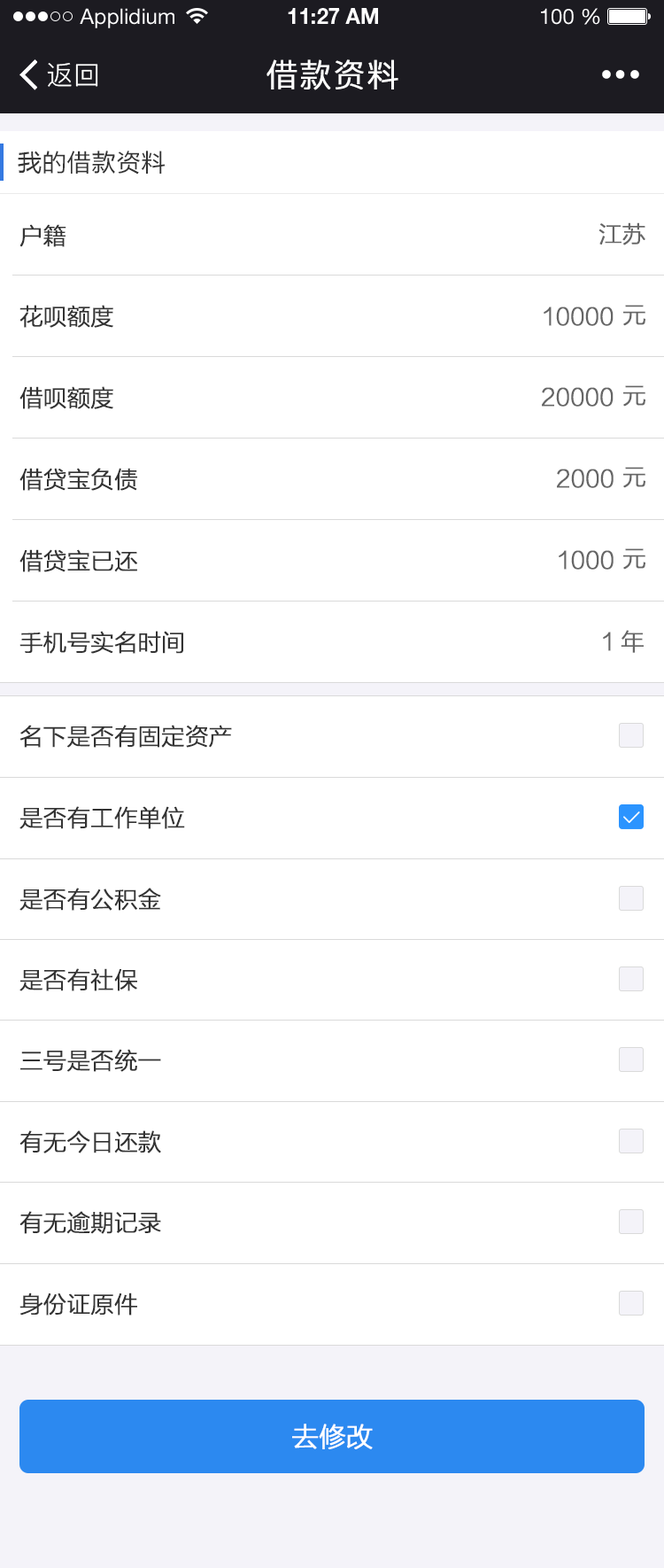
<style>
.page{position:relative;width:664px;height:1568px;background:#ffffff}
.page>*{position:absolute;margin:0}
.t1{font:21.3px "HelveticaNeueLTStd-Roman";color:#ffffff}
.t2{font:21.3px "HelveticaNeueLTStd-Bd";color:#ffffff}
.t3{font:26.6px "PingFang-SC-Regular";letter-spacing:0.025em;color:#ffffff}
.t4{font:31.9px "PingFang-SC-Regular";letter-spacing:0.025em;color:#ffffff;font-weight:bold}
.t5{font:24.8px "FZLTH_YS_GBK";color:#333333}
.t6{font:23px "FZLTXHK--GBK1-0";color:#333333;font-weight:bold}
.t7{font:23px "FZLTXHK--GBK1-0";color:#666666;font-weight:bold}
.t8{font:26.6px "FZLTXHK--GBK1-0";color:#ffffff;font-weight:bold}
</style>
<div class="page">
<p class="t1" style="left:80px;top:8px;width:95px;height:20px">Applidium</p>
<p class="t2" style="left:288px;top:8px;width:90px;height:16px">11:27 AM</p>
<p class="t1" style="left:541px;top:8px;width:60px;height:17px">100 %</p>
<p class="t3" style="left:47px;top:63px;width:51px;height:24px">返回</p>
<p class="t4" style="left:267px;top:59px;width:132px;height:31px">借款资料</p>
<p class="t5" style="left:18px;top:151px;width:148px;height:24px">我的借款资料</p>
<p class="t6" style="left:19px;top:224px;width:47px;height:23px">户籍</p>
<p class="t7" style="left:599px;top:222px;width:47px;height:23px">江苏</p>
<p class="t6" style="left:19px;top:305px;width:94px;height:23px">花呗额度</p>
<p class="t7" style="left:624px;top:305px;width:22px;height:21px">元</p>
<p class="t7" style="left:544px;top:307px;width:70px;height:19px">10000</p>
<p class="t6" style="left:19px;top:386px;width:94px;height:23px">借呗额度</p>
<p class="t7" style="left:542px;top:387px;width:72px;height:20px">20000</p>
<p class="t7" style="left:624px;top:385px;width:22px;height:22px">元</p>
<p class="t6" style="left:19px;top:468px;width:118px;height:23px">借贷宝负债</p>
<p class="t7" style="left:557px;top:469px;width:57px;height:19px">2000</p>
<p class="t7" style="left:624px;top:467px;width:22px;height:21px">元</p>
<p class="t6" style="left:19px;top:549px;width:118px;height:23px">借贷宝已还</p>
<p class="t7" style="left:559px;top:550px;width:55px;height:20px">1000</p>
<p class="t7" style="left:624px;top:548px;width:22px;height:22px">元</p>
<p class="t7" style="left:603px;top:630px;width:41px;height:23px">1年</p>
<p class="t6" style="left:19px;top:631px;width:164px;height:23px">手机号实名时间</p>
<p class="t6" style="left:19px;top:725px;width:213px;height:23px">名下是否有固定资产</p>
<p class="t6" style="left:19px;top:806px;width:166px;height:23px">是否有工作单位</p>
<p class="t6" style="left:19px;top:888px;width:142px;height:23px">是否有公积金</p>
<p class="t6" style="left:19px;top:968px;width:118px;height:23px">是否有社保</p>
<p class="t6" style="left:20px;top:1049px;width:141px;height:23px">三号是否统一</p>
<p class="t6" style="left:19px;top:1130px;width:142px;height:23px">有无今日还款</p>
<p class="t6" style="left:19px;top:1211px;width:142px;height:23px">有无逾期记录</p>
<p class="t6" style="left:19px;top:1292px;width:118px;height:24px">身份证原件</p>
<p class="t8" style="left:292px;top:1424px;width:81px;height:25px">去修改</p>
</div>
